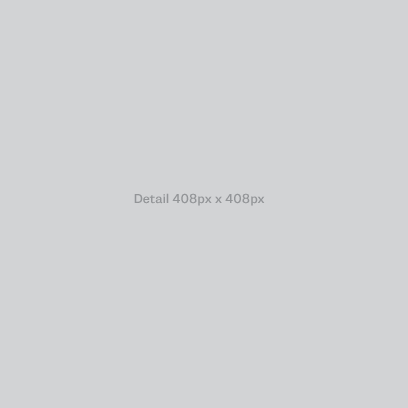
<style>
.page{position:relative;width:408px;height:408px;background:#d2d3d5}
.page>*{position:absolute;margin:0}
.t1{font:12.9px "SupriaSans-Medium";color:#939598}
</style>
<div class="page">
<p class="t1" style="left:134px;top:193px;width:131px;height:13px">Detail 408px x 408px</p>
</div>
